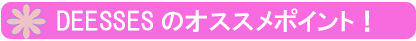
<style>
.page{position:relative;width:416px;height:41px;background:#f76bde}
.page>*{position:absolute;margin:0}
.t1{font:24.6px "HGPGothicE";color:#ffffff}
</style>
<div class="page">
<p class="t1" style="left:57px;top:8px;width:313px;height:24px">DEESSESのオススメポイント！</p>
</div>
